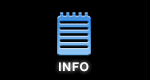
<style>
.page{position:relative;width:150px;height:80px;background:#000000}
.page>*{position:absolute;margin:0}
.t1{font:12px "AlteHaasGrotesk_Bold";letter-spacing:0.05em;color:#ffffff}
</style>
<div class="page">
<p class="t1" style="left:59px;top:62px;width:30px;height:10px">INFO</p>
</div>
